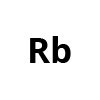
<style>
.page{position:relative;width:100px;height:100px;background:#ffffff}
.page>*{position:absolute;margin:0}
.t1{font:35px "OpenSans-Bold";color:#000000}
</style>
<div class="page">
<p class="t1" style="left:30px;top:36px;width:41px;height:27px">Rb</p>
</div>
